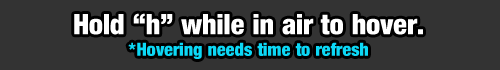
<style>
.page{position:relative;width:500px;height:70px;background:#333333}
.page>*{position:absolute;margin:0}
.t1{font:28px "Harvest";color:#ffffff}
.t2{font:18px "Harvest";color:#0cd8f6}
</style>
<div class="page">
<p class="t1" style="left:74px;top:13px;width:349px;height:46px;text-align:center">Hold “h” while in air to hover.<br><span class="t2">*Hovering needs time to refresh</span></p>
</div>
